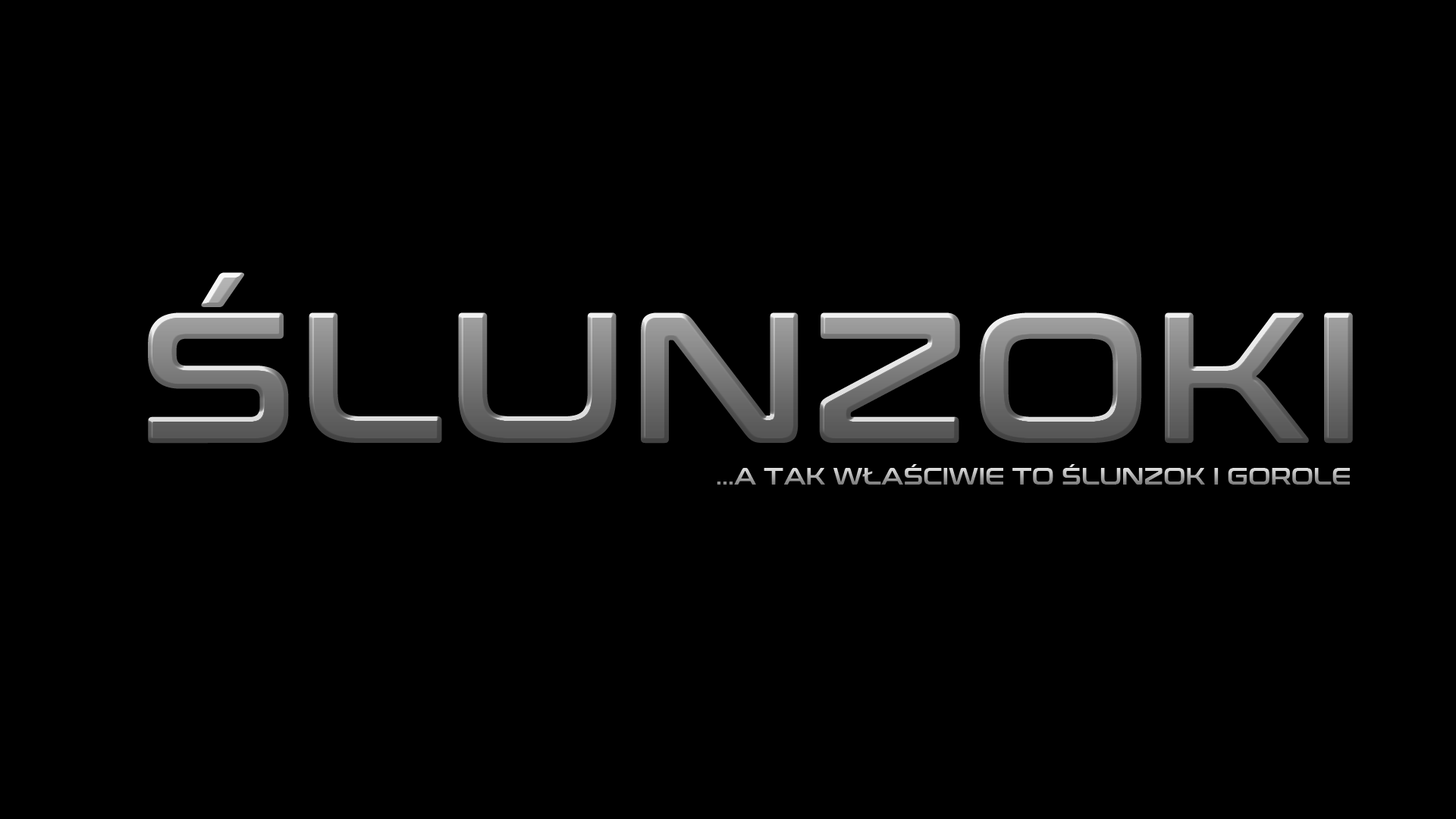
<style>
.page{position:relative;width:1456px;height:819px;background:#000000}
.page>*{position:absolute;margin:0}
.t1{font:186.1px "ConthraxSb-Regular"}
.t2{font:22.7px "ConthraxSb-Regular"}
</style>
<div class="page">
<p class="t1" style="left:148px;top:272px;width:1205px;height:172px">ŚLUNZOKI</p>
<p class="t2" style="left:717px;top:464px;width:633px;height:21px">...A TAK WŁAŚCIWIE TO ŚLUNZOK I GOROLE</p>
</div>
